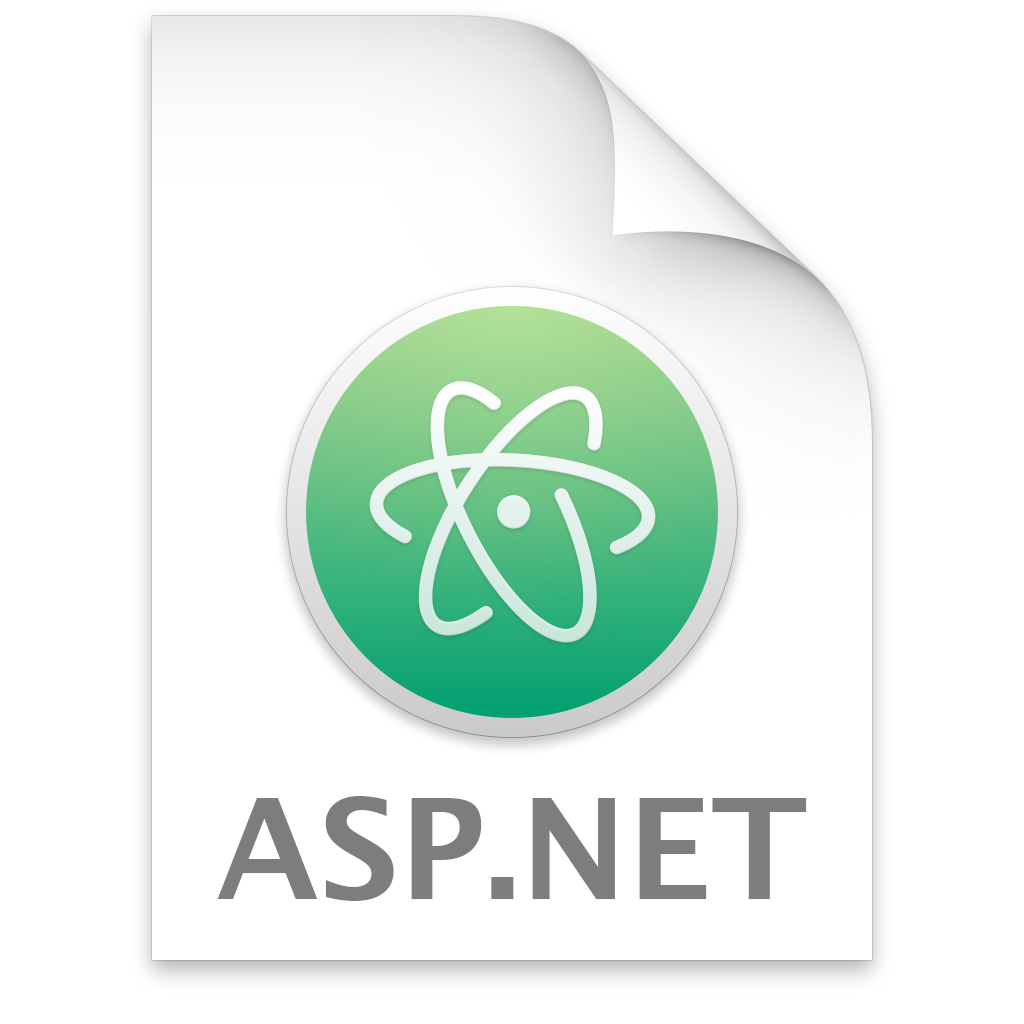
<style>
.page{position:relative;width:1024px;height:1024px;background:#ffffff}
.page>*{position:absolute;margin:0}
.t1{font:140px "LucidaGrande-Bold";color:#7d7d7d}
</style>
<div class="page">
<p class="t1" style="left:217px;top:796px;width:590px;height:105px">ASP.NET</p>
</div>
